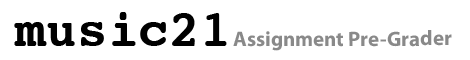
<style>
.page{position:relative;width:470px;height:60px;background:#ffffff}
.page>*{position:absolute;margin:0}
.t1{font:51.2px "Courier-Bold";color:#000000}
.t2{font:21px "MyriadPro-Bold";color:#898989}
</style>
<div class="page">
<p class="t1" style="left:14px;top:12px;width:213px;height:34px">music21</p>
<p class="t2" style="left:233px;top:30px;width:219px;height:21px">Assignment Pre-Grader</p>
</div>
